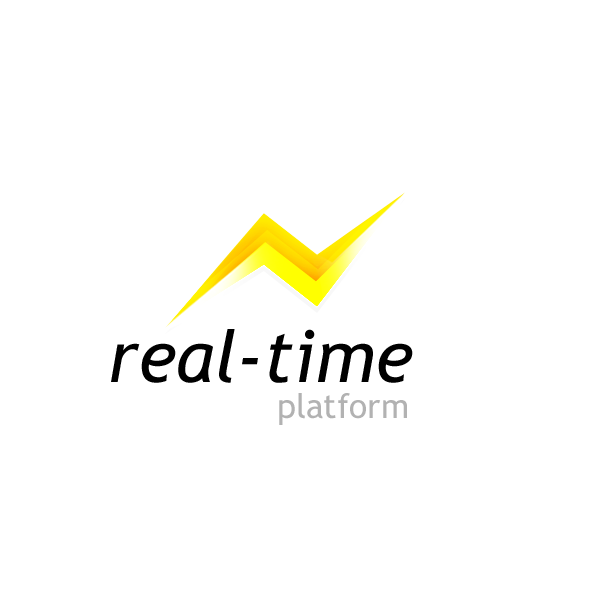
<style>
.page{position:relative;width:600px;height:600px;background:#ffffff}
.page>*{position:absolute;margin:0}
.t1{font:71.8px "TrebuchetMS-Italic";color:#000000}
.t2{font:33.8px "TrebuchetMS";color:#b2b2b2}
</style>
<div class="page">
<p class="t1" style="left:111px;top:329px;width:302px;height:54px">real-time</p>
<p class="t2" style="left:279px;top:393px;width:128px;height:32px">platform</p>
</div>
